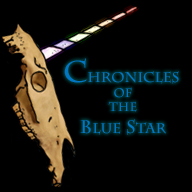
<style>
.page{position:relative;width:192px;height:192px;background:#000000}
.page>*{position:absolute;margin:0}
.t1{font:14px "CharlemagneStd-Bold";color:#0276c0}
.t2{font:30px "CharlemagneStd-Bold";color:#0276c0}
.t3{font:12px "CharlemagneStd-Bold";color:#0276c0}
.t4{font:18px "CharlemagneStd-Bold";color:#0276c0}
</style>
<div class="page">
<p class="t1" style="left:64px;top:58px;width:115px;height:77px;text-align:right"><span class="t2">C</span>hronicles<br><span class="t3">of<br>The<br></span><span class="t4">B</span>lue<span class="t4"> S</span>tar</p>
</div>
